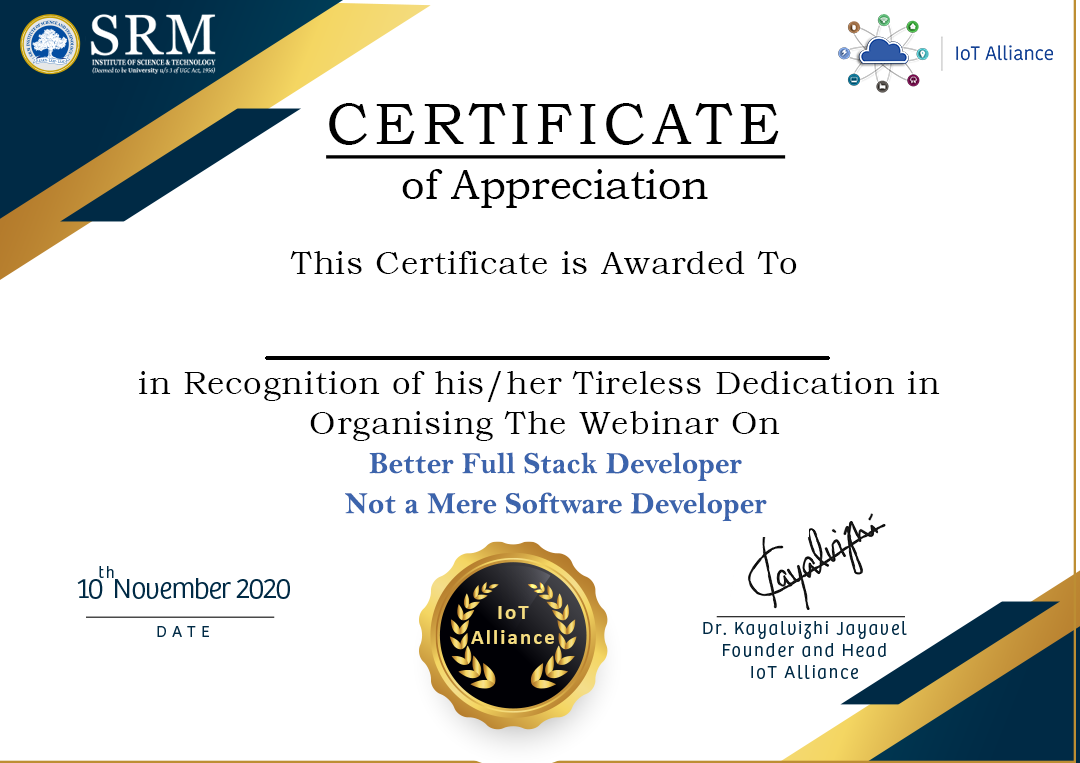
<style>
.page{position:relative;width:1080px;height:763px;background:#ffffff}
.page>*{position:absolute;margin:0}
.t1{font:58.3px "BookmanOldStyle";letter-spacing:0.09em;color:#000000;text-decoration:underline}
.t2{font:41.7px "BookmanOldStyle";color:#000000}
.t3{font:33.3px "BookmanOldStyle";letter-spacing:0.02em;color:#000000}
.t4{font:30.5px "BellMTBold";color:#3c64ac}
</style>
<div class="page">
<p class="t1" style="left:326px;top:103px;width:460px;height:56px">CERTIFICATE</p>
<p class="t2" style="left:402px;top:169px;width:306px;height:39px">of Appreciation</p>
<p class="t3" style="left:139px;top:251px;width:801px;height:190px;text-align:center">This Certificate is Awarded To<br><br><br>in Recognition of his/her Tireless Dedication in <br>Organising The Webinar On</p>
<p class="t4" style="left:345px;top:452px;width:422px;height:70px;text-align:center">Better Full Stack Developer <br><br><br>Not a Mere Software Developer</p>
</div>
